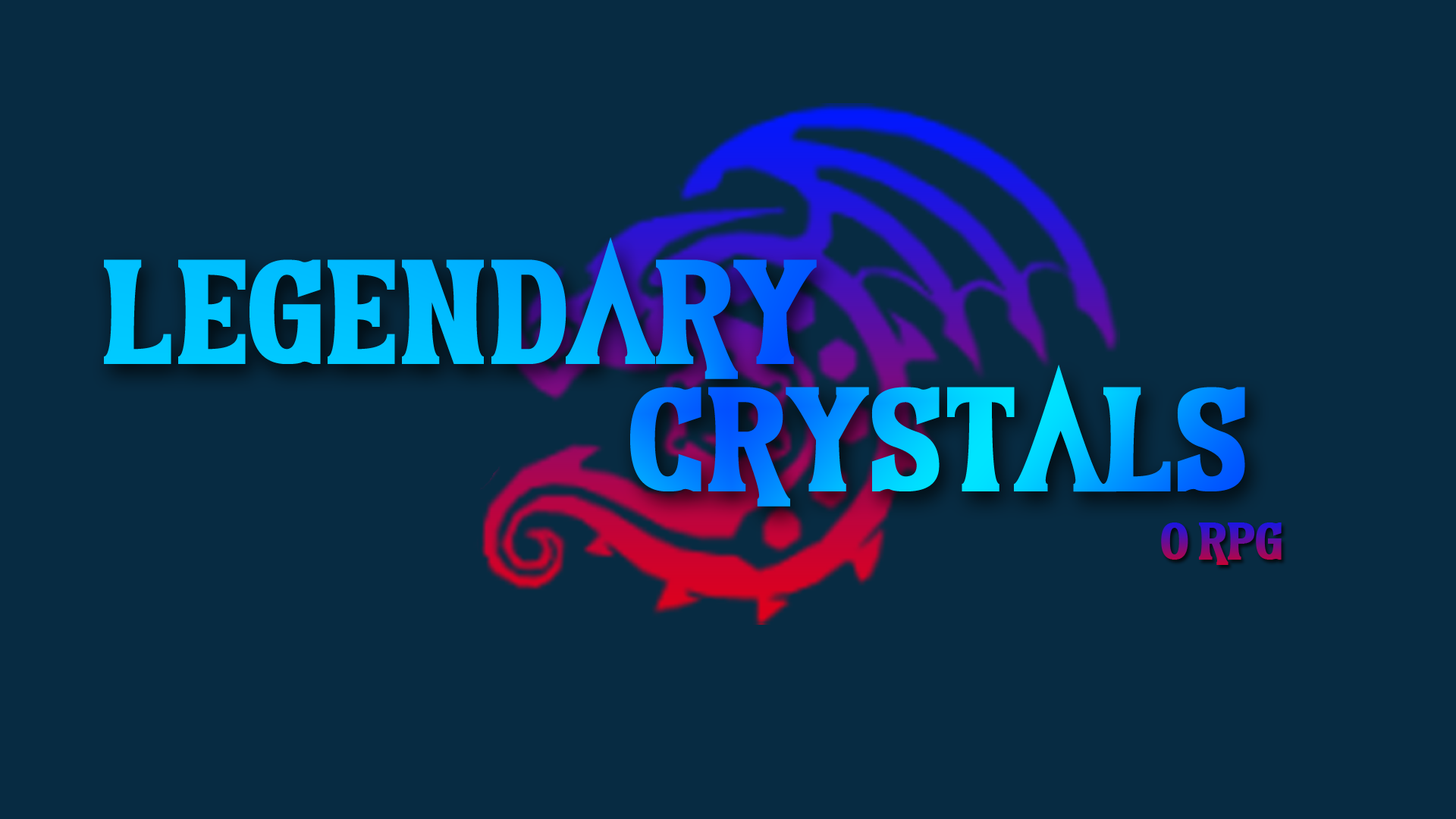
<style>
.page{position:relative;width:1456px;height:819px;background:#072b42}
.page>*{position:absolute;margin:0}
.t1{font:152.7px "Earthshattering";color:#00bbff}
.t2{font:152.7px "Earthshattering"}
.t3{font:54.6px "Earthshattering"}
</style>
<div class="page">
<p class="t1" style="left:104px;top:237px;width:713px;height:142px">Legendary</p>
<p class="t2" style="left:630px;top:365px;width:615px;height:142px">Crystals</p>
<p class="t3" style="left:1161px;top:522px;width:121px;height:43px">O RPG</p>
</div>
